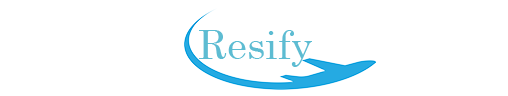
<style>
.page{position:relative;width:508px;height:96px;background:#ffffff}
.page>*{position:absolute;margin:0}
.t1{font:40px "Century";color:#5dbcd2}
</style>
<div class="page">
<p class="t1" style="left:199px;top:30px;width:113px;height:37px">Resify</p>
</div>
